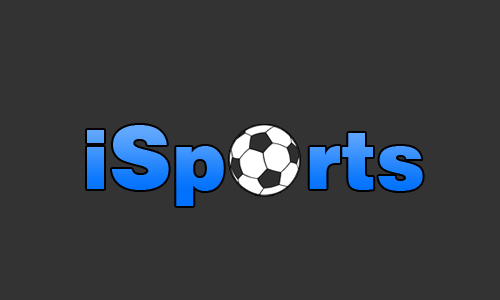
<style>
.page{position:relative;width:500px;height:300px;background:#333333}
.page>*{position:absolute;margin:0}
.t1{font:80px "Swiss721BT-Black"}
.t2{font:88px "Swiss721BT-Black"}
</style>
<div class="page">
<p class="t1" style="left:87px;top:125px;width:336px;height:81px">i<span class="t2">S</span>p   rts</p>
</div>
